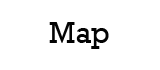
<style>
.page{position:relative;width:160px;height:70px;background:#ffffff}
.page>*{position:absolute;margin:0}
.t1{font:30px "Rockwell";color:#030303}
</style>
<div class="page">
<p class="t1" style="left:49px;top:22px;width:60px;height:27px">Map</p>
</div>
